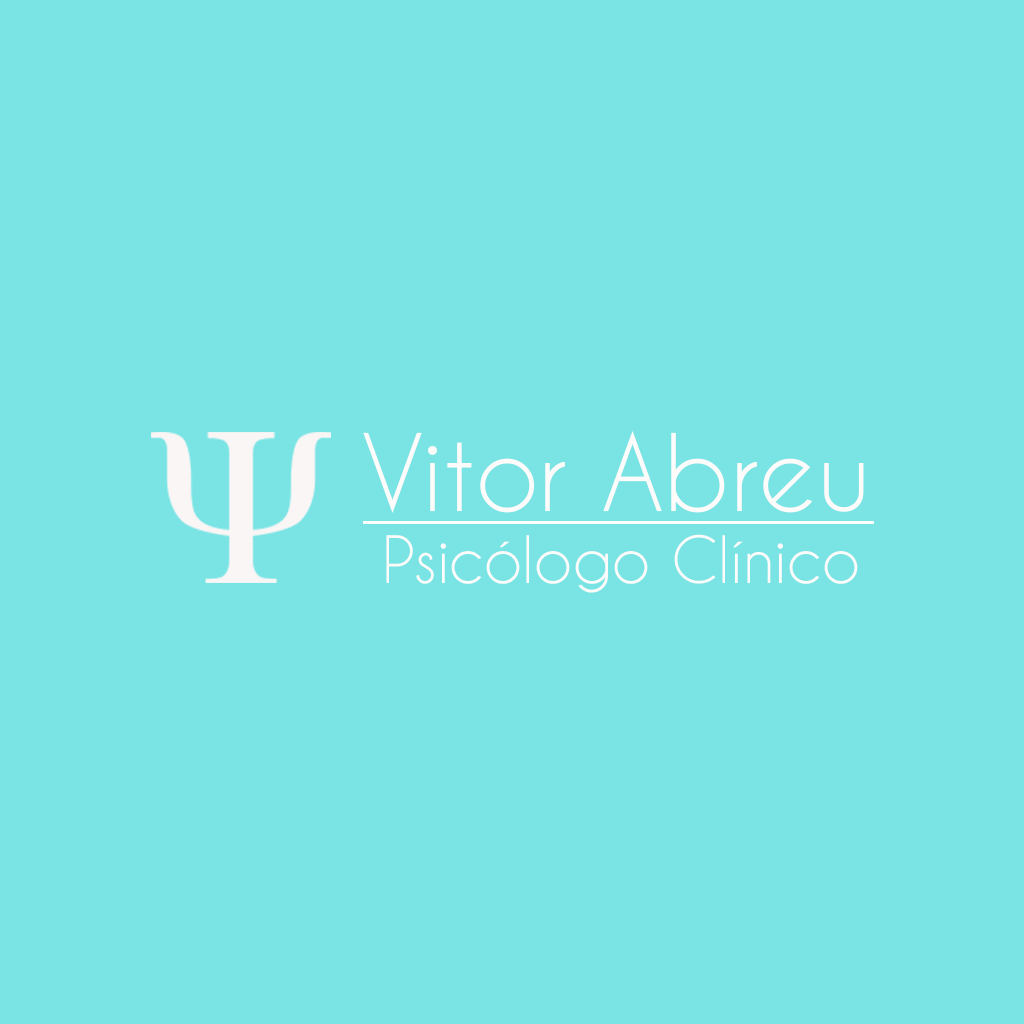
<style>
.page{position:relative;width:1024px;height:1024px;background:#7ae4e4}
.page>*{position:absolute;margin:0}
.t1{font:99.5px "CaviarDreams";color:#fefbfb}
.t2{font:61px "CaviarDreams";color:#fefbfb}
</style>
<div class="page">
<p class="t1" style="left:363px;top:431px;width:501px;height:82px">Vitor Abreu</p>
<p class="t2" style="left:386px;top:534px;width:472px;height:59px">Psicólogo Clínico</p>
</div>
